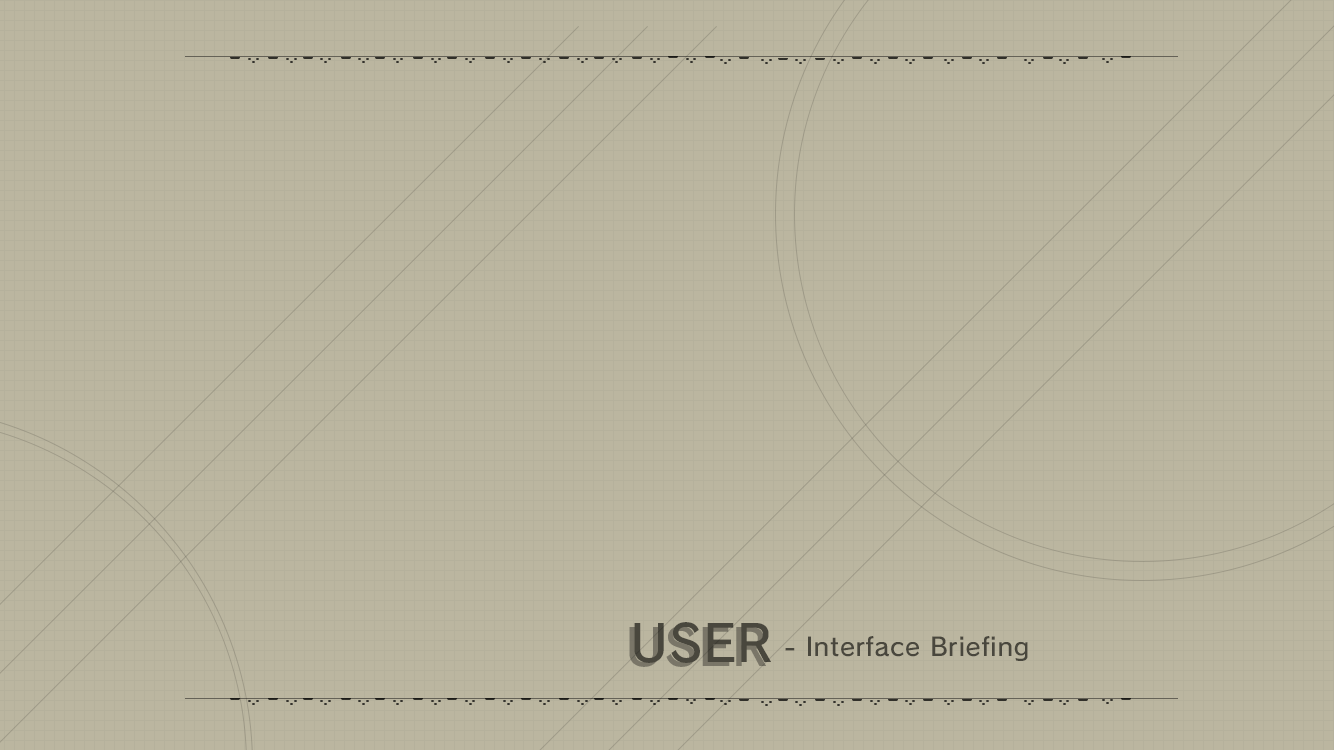
<style>
.page{position:relative;width:1334px;height:750px;background:#bbb6a0}
.page>*{position:absolute;margin:0}
.t1{font:50px "SCEPS3RodinLATIN-Regular";color:#49473d}
.t2{font:25px "SCEPS3RodinLATIN-Regular";letter-spacing:0.025em;color:#49473d}
</style>
<div class="page">
<p class="t1" style="left:634px;top:622px;width:137px;height:41px">USER</p>
<p class="t2" style="left:785px;top:636px;width:243px;height:25px">- Interface Briefing</p>
</div>
